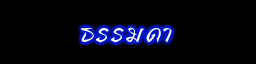
<style>
.page{position:relative;width:256px;height:64px;background:#000000}
.page>*{position:absolute;margin:0}
.t1{font:36px "DsSupasawatD";color:#ffffff}
</style>
<div class="page">
<p class="t1" style="left:81px;top:27px;width:91px;height:16px">¸ÃÃÁ´Ò</p>
</div>
